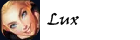
<style>
.page{position:relative;width:140px;height:40px;background:#ffffff}
.page>*{position:absolute;margin:0}
.t1{font:12px "VinerHandITC";color:#000000}
</style>
<div class="page">
<p class="t1" style="left:47px;top:12px;width:32px;height:13px">Lux</p>
</div>
